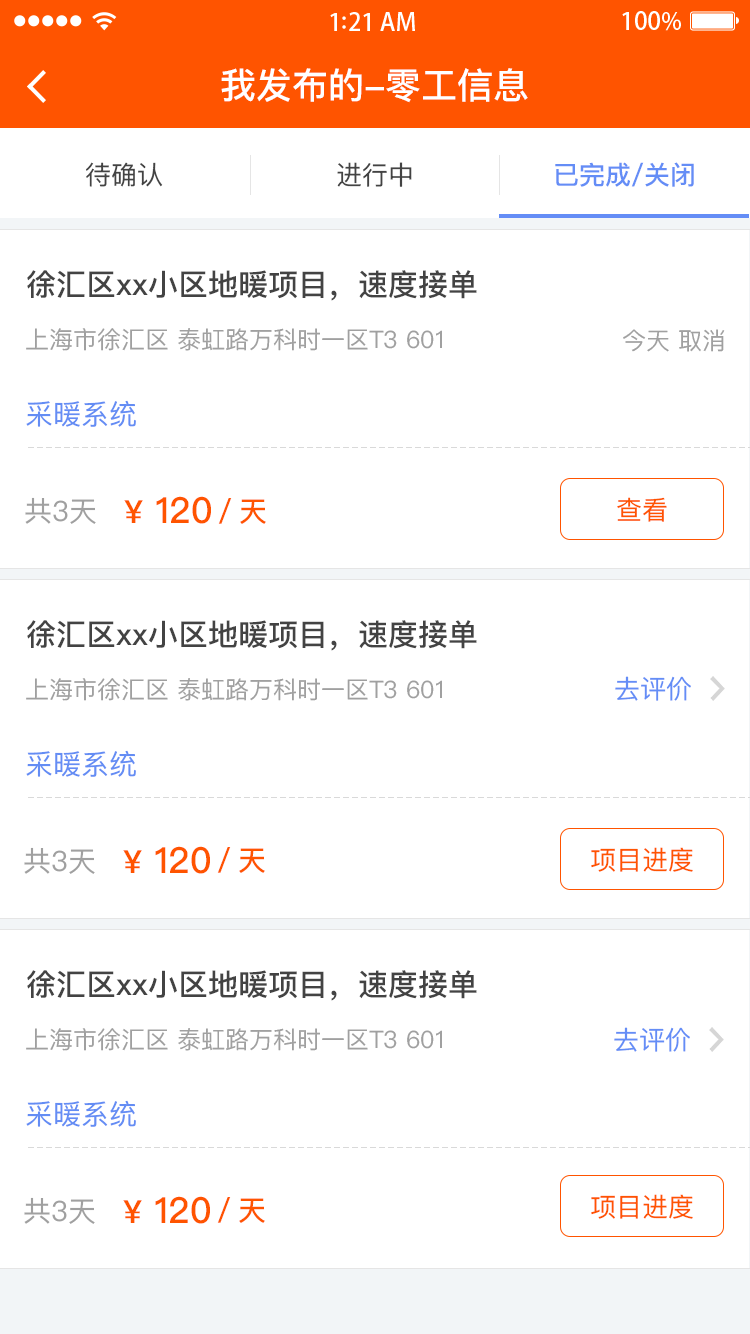
<style>
.page{position:relative;width:750px;height:1334px;background:#ffffff}
.page>*{position:absolute;margin:0}
.t1{font:36px "PingFangSC-Medium";color:#ffffff}
.t2{font:26px "PingFangSC-Regular";color:#434343}
.t3{font:26px "PingFangSC-Medium";color:#648df6}
.t4{font:30px "PingFangSC-Medium";color:#434343}
.t5{font:24px "PingFangSC-Regular";color:#a0a0a0}
.t6{font:28px "PingFangSC-Regular";color:#648df4}
.t7{font:28px "PingFangSC-Regular";color:#a0a0a0}
.t8{font:36px "PingFangSC-Medium";color:#ff5400}
.t9{font:32px "PingFangSC-Medium";color:#ff5400}
.t10{font:26px "PingFangSC-Regular";color:#ff5400}
.t11{font:28px "PingFangSC-Medium";color:#ff5400}
.t12{font:26px "PingFangSC-Regular";color:#648df6}
</style>
<div class="page">
<p class="t1" style="left:221px;top:68px;width:307px;height:35px">我发布的-零工信息</p>
<p class="t2" style="left:86px;top:162px;width:77px;height:25px">待确认</p>
<p class="t2" style="left:337px;top:162px;width:75px;height:25px">进行中</p>
<p class="t3" style="left:555px;top:162px;width:139px;height:25px">已完成/关闭</p>
<p class="t4" style="left:27px;top:270px;width:450px;height:31px">徐汇区xx小区地暖项目，速度接单</p>
<p class="t5" style="left:26px;top:328px;width:416px;height:23px">上海市徐汇区 泰虹路万科时一区T3 601</p>
<p class="t5" style="left:623px;top:329px;width:102px;height:23px">今天 取消</p>
<p class="t6" style="left:26px;top:400px;width:110px;height:27px">采暖系统</p>
<p class="t7" style="left:25px;top:497px;width:71px;height:27px">共3天</p>
<p class="t8" style="left:124px;top:496px;width:87px;height:28px"><span class="t9">¥</span> 120</p>
<p class="t10" style="left:617px;top:497px;width:50px;height:25px">查看</p>
<p class="t11" style="left:218px;top:498px;width:48px;height:26px">／天</p>
<p class="t4" style="left:27px;top:620px;width:450px;height:31px">徐汇区xx小区地暖项目，速度接单</p>
<p class="t5" style="left:26px;top:678px;width:416px;height:23px">上海市徐汇区 泰虹路万科时一区T3 601</p>
<p class="t12" style="left:615px;top:676px;width:76px;height:25px">去评价</p>
<p class="t6" style="left:26px;top:750px;width:110px;height:27px">采暖系统</p>
<p class="t8" style="left:123px;top:846px;width:87px;height:28px"><span class="t9">¥</span> 120</p>
<p class="t7" style="left:24px;top:847px;width:71px;height:27px">共3天</p>
<p class="t11" style="left:217px;top:847px;width:48px;height:26px">／天</p>
<p class="t10" style="left:591px;top:847px;width:102px;height:25px">项目进度</p>
<p class="t4" style="left:27px;top:970px;width:450px;height:31px">徐汇区xx小区地暖项目，速度接单</p>
<p class="t5" style="left:26px;top:1028px;width:416px;height:23px">上海市徐汇区 泰虹路万科时一区T3 601</p>
<p class="t12" style="left:614px;top:1027px;width:76px;height:25px">去评价</p>
<p class="t6" style="left:26px;top:1100px;width:110px;height:27px">采暖系统</p>
<p class="t7" style="left:24px;top:1197px;width:71px;height:27px">共3天</p>
<p class="t8" style="left:123px;top:1196px;width:87px;height:28px"><span class="t9">¥</span> 120</p>
<p class="t11" style="left:217px;top:1197px;width:48px;height:26px">／天</p>
<p class="t10" style="left:591px;top:1194px;width:102px;height:25px">项目进度</p>
</div>
